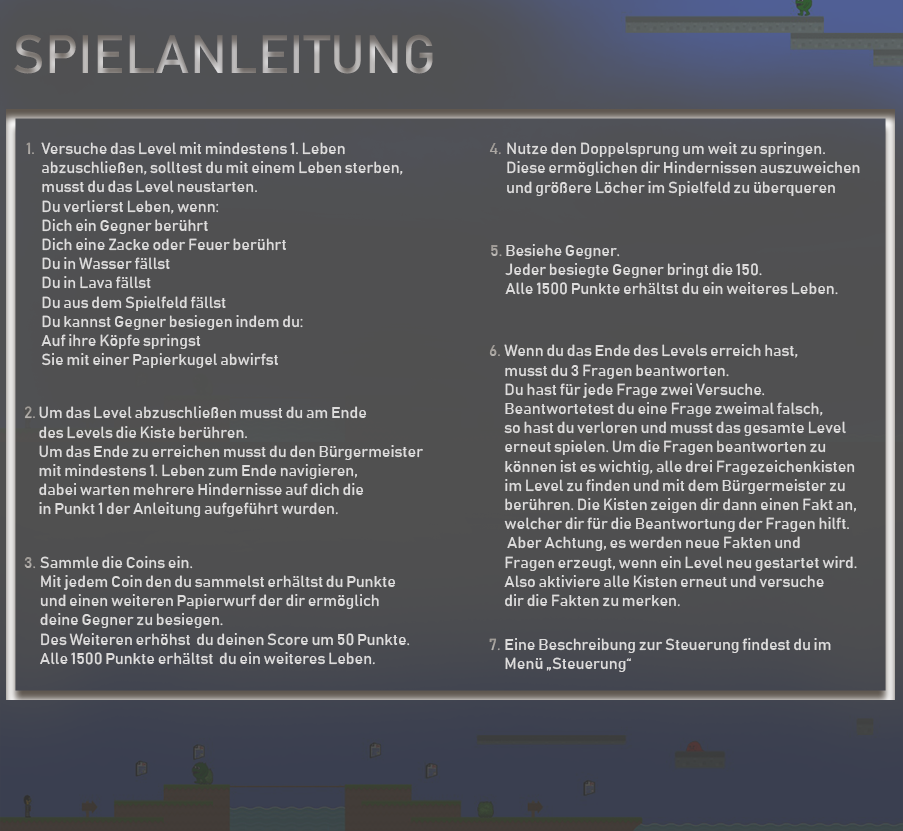
<style>
.page{position:relative;width:903px;height:831px}
.page>*{position:absolute;margin:0}
.t1{font:53.3px "Bahnschrift"}
.t2{font:16px "Bahnschrift";color:#a6a29d}
.t3{font:16px "Bahnschrift";color:#dddcdc}
.t4{font:16px "Bahnschrift";color:#a9a4a0}
.t5{font:16px "Bahnschrift";color:#a7a39f}
.t6{font:16px "Bahnschrift";color:#a7a29e}
.t7{font:16px "Bahnschrift";color:#afaba7}
.t8{font:16px "Bahnschrift";color:#a39e9a}
</style>
<div class="page">
<p class="t1" style="left:14px;top:34px;width:419px;height:40px">SPIELANLEITUNG</p>
<p class="t2" style="left:26px;top:142px;width:8px;height:13px">1.</p>
<p class="t3" style="left:41px;top:142px;width:362px;height:226px">Versuche das Level mit mindestens 1. Leben <br>   abzuschließen, solltest du mit einem Leben sterben, <br>   musst du das Level neustarten.<br>   Du verlierst Leben, wenn:<br>   Dich ein Gegner berührt<br>   Dich eine Zacke oder Feuer berührt<br>   Du in Wasser fällst<br>   Du in Lava fällst<br>   Du aus dem Spielfeld fällst<br>   Du kannst Gegner besiegen indem du:<br>   Auf ihre Köpfe springst<br>   Sie mit einer Papierkugel abwirfst</p>
<p class="t4" style="left:489px;top:143px;width:12px;height:12px">4.</p>
<p class="t3" style="left:507px;top:142px;width:353px;height:54px">Nutze den Doppelsprung um weit zu springen. <br>Diese ermöglichen dir Hindernissen auszuweichen <br>und größere Löcher im Spielfeld zu überqueren</p>
<p class="t5" style="left:491px;top:245px;width:11px;height:12px">5.</p>
<p class="t3" style="left:505px;top:244px;width:333px;height:51px">Besiehe Gegner.<br>Jeder besiegte Gegner bringt die 150. <br>Alle 1500 Punkte erhältst du ein weiteres Leben.</p>
<p class="t6" style="left:489px;top:345px;width:11px;height:11px">6.</p>
<p class="t3" style="left:504px;top:344px;width:353px;height:263px">Wenn du das Ende des Levels erreich hast, <br>musst du 3 Fragen beantworten. <br>Du hast für jede Frage zwei Versuche. <br>Beantwortetest du eine Frage zweimal falsch, <br>so hast du verloren und musst das gesamte Level <br>erneut spielen. Um die Fragen beantworten zu <br>können ist es wichtig, alle drei Fragezeichenkisten <br>im Level zu finden und mit dem Bürgermeister zu <br>berühren. Die Kisten zeigen dir dann einen Fakt an, <br>welcher dir für die Beantwortung der Fragen hilft.<br> Aber Achtung, es werden neue Fakten und <br>Fragen erzeugt, wenn ein Level neu gestartet wird. <br>Also aktiviere alle Kisten erneut und versuche <br>dir die Fakten zu merken.</p>
<p class="t7" style="left:24px;top:406px;width:11px;height:13px">2.</p>
<p class="t3" style="left:39px;top:406px;width:384px;height:111px">Um das Level abzuschließen musst du am Ende <br>  des Levels die Kiste berühren.<br>  Um das Ende zu erreichen musst du den Bürgermeister <br>  mit mindestens 1. Leben zum Ende navigieren, <br>  dabei warten mehrere Hindernisse auf dich die<br>  in Punkt 1 der Anleitung aufgeführt wurden.</p>
<p class="t4" style="left:24px;top:557px;width:12px;height:12px">3.</p>
<p class="t3" style="left:40px;top:556px;width:370px;height:109px">Sammle die Coins ein. <br> Mit jedem Coin den du sammelst erhältst du Punkte <br> und einen weiteren Papierwurf der dir ermöglich <br> deine Gegner zu besiegen. <br> Des Weiteren erhöhst  du deinen Score um 50 Punkte. <br> Alle 1500 Punkte erhältst  du ein weiteres Leben.</p>
<p class="t8" style="left:489px;top:638px;width:11px;height:13px">7.</p>
<p class="t3" style="left:505px;top:638px;width:326px;height:34px">Eine Beschreibung zur Steuerung findest du im <br>Menü „Steuerung“</p>
</div>
